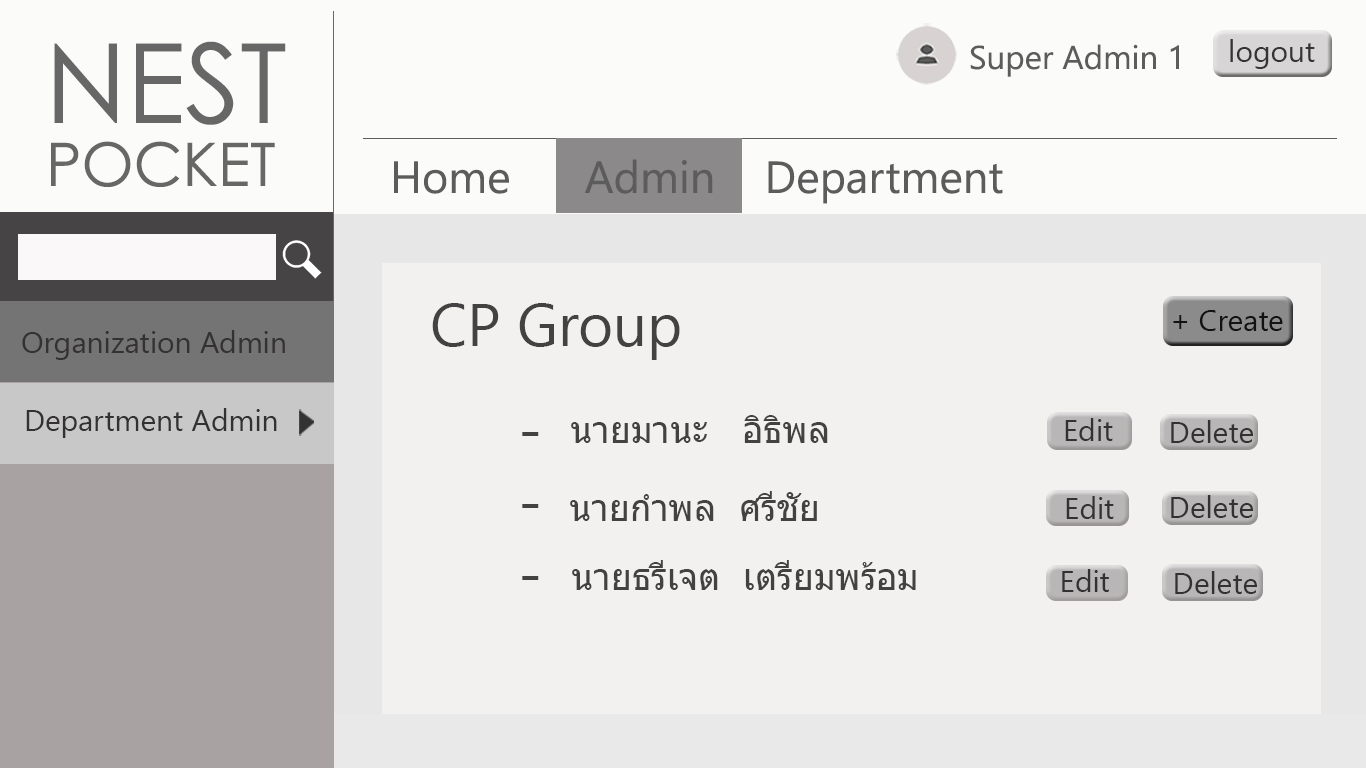
<style>
.page{position:relative;width:1366px;height:768px;background:#f3f0f0}
.page>*{position:absolute;margin:0}
.t1{font:110px "CenturyGothic";color:#676767}
.t2{font:90px "CenturyGothic";color:#676767}
.t3{font:30px "SegoeUI";color:#353434}
.t4{font:33px "SegoeUI";color:#5d5c5c}
.t5{font:60px "CenturyGothic";color:#676767}
.t6{font:45px "SegoeUI";color:#5d5c5c}
.t7{font:60px "SegoeUI";color:#434141}
.t8{font:30px "SegoeUI";color:#131212}
.t9{font:30px "SegoeUI";color:#333131}
.t10{font:36px "Tahoma";color:#434141}
</style>
<div class="page">
<p class="t1" style="left:54px;top:41px;width:232px;height:84px"><span class="t2"><br></span>NEST</p>
<p class="t3" style="left:1230px;top:39px;width:85px;height:30px">logout</p>
<p class="t4" style="left:970px;top:44px;width:209px;height:33px">Super Admin 1</p>
<p class="t5" style="left:51px;top:141px;width:224px;height:46px">POCKET</p>
<p class="t6" style="left:394px;top:159px;width:609px;height:45px">Home      Admin    Department</p>
<p class="t7" style="left:432px;top:303px;width:248px;height:57px">CP Group</p>
<p class="t8" style="left:1173px;top:310px;width:110px;height:21px">+ Create</p>
<p class="t9" style="left:22px;top:330px;width:263px;height:30px">Organization Admin</p>
<p class="t9" style="left:26px;top:408px;width:251px;height:30px">Department Admin</p>
<p class="t10" style="left:571px;top:415px;width:257px;height:28px">นายมานะ   อิธิพล</p>
<p class="t9" style="left:1065px;top:418px;width:48px;height:23px">Edit</p>
<p class="t9" style="left:1171px;top:420px;width:82px;height:23px">Delete</p>
<p class="t7" style="left:522px;top:432px;width:17px;height:148px">-<br>-<br>-</p>
<p class="t10" style="left:570px;top:491px;width:247px;height:30px">นายกำพล  ศรีชัย</p>
<p class="t9" style="left:1066px;top:496px;width:48px;height:23px">Edit</p>
<p class="t9" style="left:1171px;top:495px;width:82px;height:23px">Delete</p>
<p class="t10" style="left:572px;top:560px;width:344px;height:30px">นายธรีเจต  เตรียมพร้อม</p>
<p class="t9" style="left:1062px;top:569px;width:47px;height:23px">Edit</p>
<p class="t9" style="left:1175px;top:571px;width:82px;height:23px">Delete</p>
</div>
